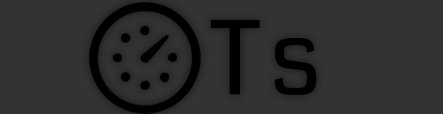
<style>
.page{position:relative;width:443px;height:114px;background:#333333}
.page>*{position:absolute;margin:0}
.t1{font:101.7px "Coda-Regular";letter-spacing:0.107em;color:#000000}
</style>
<div class="page">
<p class="t1" style="left:210px;top:20px;width:107px;height:75px">Ts</p>
</div>
